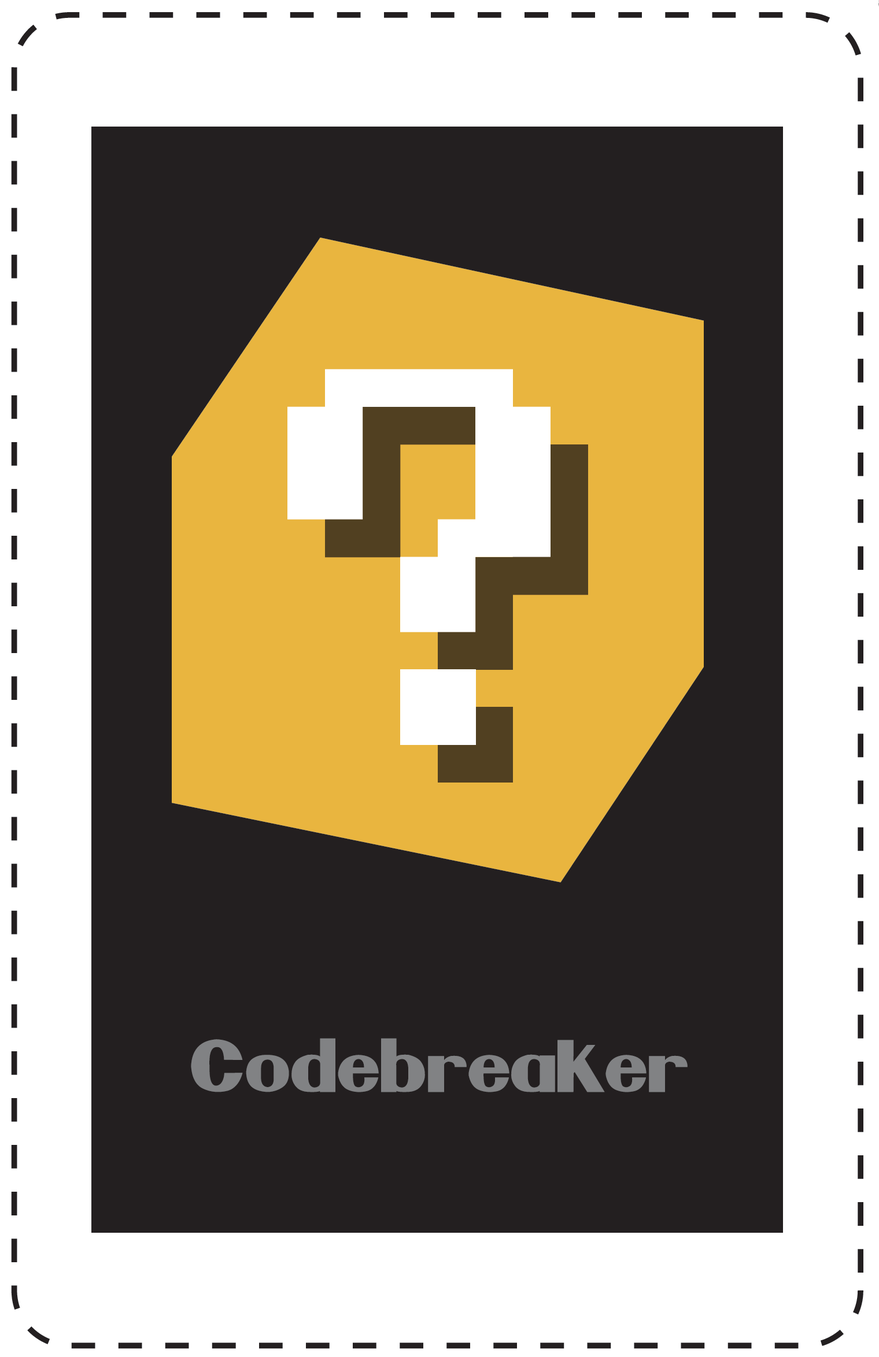
<style>
.page{position:relative;width:879px;height:1357px;background:#231f20}
.page>*{position:absolute;margin:0}
.t1{font:66.5px "Pretendo";color:#818284}
</style>
<div class="page">
<p class="t1" style="left:191px;top:1038px;width:496px;height:54px">Codebreaker</p>
</div>
